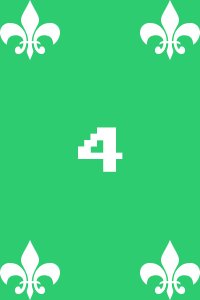
<style>
.page{position:relative;width:200px;height:300px;background:#2ecc71}
.page>*{position:absolute;margin:0}
.t1{font:50.4px "PressStart2P-Regular";color:#ffffff}
</style>
<div class="page">
<p class="t1" style="left:78px;top:127px;width:45px;height:45px">4</p>
</div>
